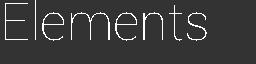
<style>
.page{position:relative;width:256px;height:64px;background:#333333}
.page>*{position:absolute;margin:0}
.t1{font:52px "Roboto-Thin";color:#ffffff}
</style>
<div class="page">
<p class="t1" style="left:5px;top:0px;width:202px;height:41px">Elements</p>
</div>
